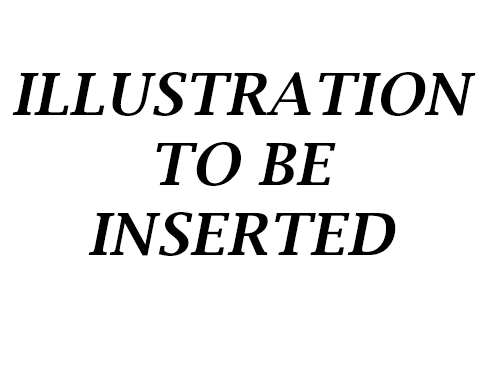
<style>
.page{position:relative;width:480px;height:380px;background:#ffffff}
.page>*{position:absolute;margin:0}
.t1{font:58.3px "LucidaBright-DemiItalic";color:#000000;text-transform:uppercase}
.t2{font:58.3px "LucidaBright-DemiItalic";color:#e5b6b0;text-transform:uppercase}
</style>
<div class="page">
<p class="t1" style="left:12px;top:72px;width:464px;height:184px"><span class="t2"><br></span>ILLustration to be inserted</p>
</div>
